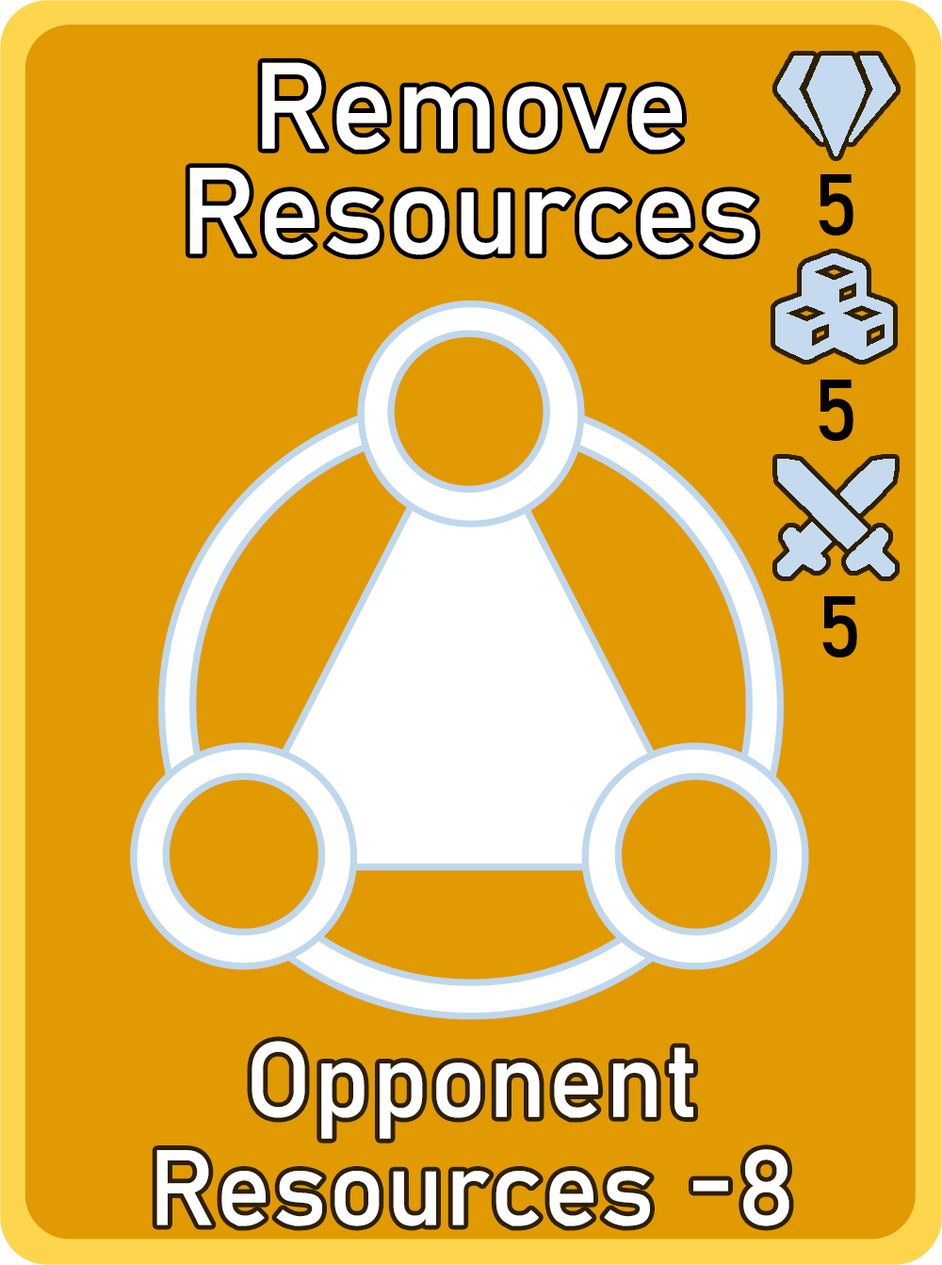
<style>
.page{position:relative;width:942px;height:1265px;background:#e19a02}
.page>*{position:absolute;margin:0}
.t1{font:120.6px/105.1px "Bahnschrift";letter-spacing:0.01em;color:#ffffff}
.t2{font:85px "Bahnschrift";letter-spacing:0.01em;color:#000000}
.t3{font:105.1px/108.2px "Bahnschrift";letter-spacing:0.01em;color:#ffffff}
</style>
<div class="page">
<p class="t1" style="left:189px;top:62px;width:567px;height:193px;text-align:center">Remove<br>Resources</p>
<p class="t2" style="left:819px;top:174px;width:35px;height:62px">5</p>
<p class="t2" style="left:819px;top:380px;width:35px;height:61px">5</p>
<p class="t2" style="left:823px;top:596px;width:34px;height:62px">5</p>
<p class="t3" style="left:156px;top:1041px;width:634px;height:186px;text-align:center">Opponent<br>Resources -8</p>
</div>
